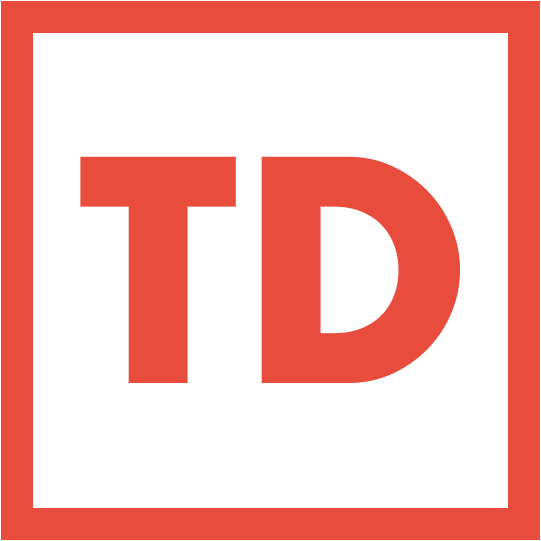
<style>
.page{position:relative;width:541px;height:541px;background:#ffffff}
.page>*{position:absolute;margin:0}
.t1{font:300px "Futura-Bold";color:#e74c3c}
</style>
<div class="page">
<p class="t1" style="left:80px;top:156px;width:380px;height:227px">TD</p>
</div>
